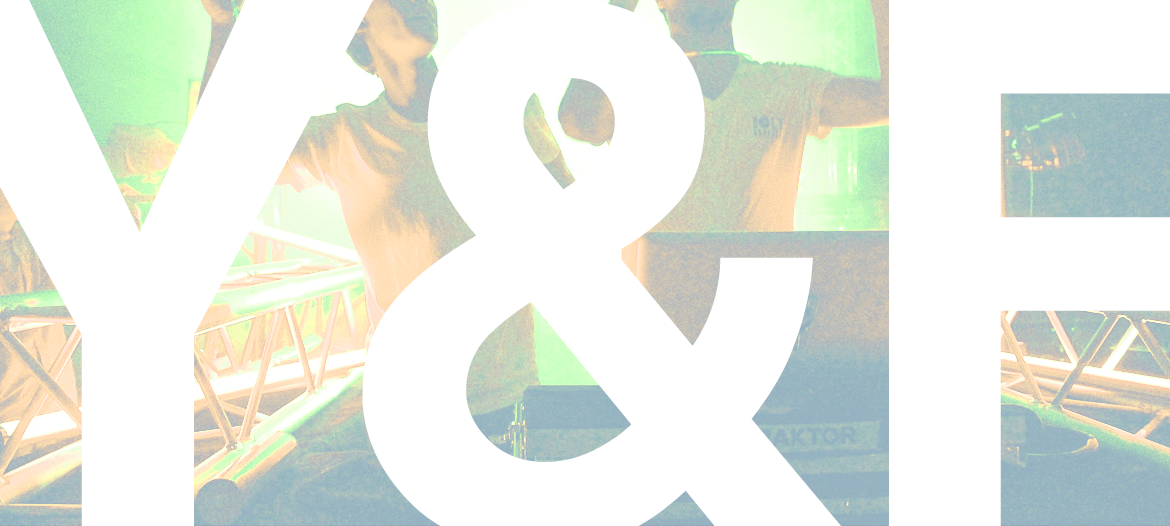
<style>
.page{position:relative;width:1170px;height:526px;background:#ffffff}
.page>*{position:absolute;margin:0}
.t1{font:747px "Helvetica-Bold";letter-spacing:-0.08em;color:#ffffff}
.t2{font:747px "Helvetica-Bold";letter-spacing:-0.04em;color:#ffffff}
.t3{font:747px "Helvetica-Bold";letter-spacing:-0.06em;color:#ffffff}
</style>
<div class="page">
<p class="t1" style="left:0px;top:0px;width:1170px;height:526px">Y<span class="t2">&amp;</span><span class="t3">F</span></p>
</div>
